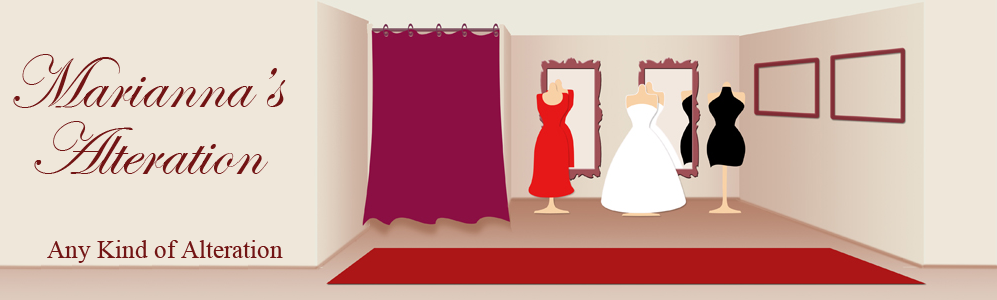
<style>
.page{position:relative;width:997px;height:300px;background:#efe7da}
.page>*{position:absolute;margin:0}
.t1{font:75px/66.7px "EdwardianScriptITC";color:#721414}
.t2{font:25px "TimesNewRomanPSMT";color:#721414}
</style>
<div class="page">
<p class="t1" style="left:13px;top:54px;width:273px;height:120px;text-align:center">Marianna’s<br>Alteration</p>
<p class="t2" style="left:47px;top:240px;width:236px;height:23px">Any Kind of Alteration</p>
</div>
